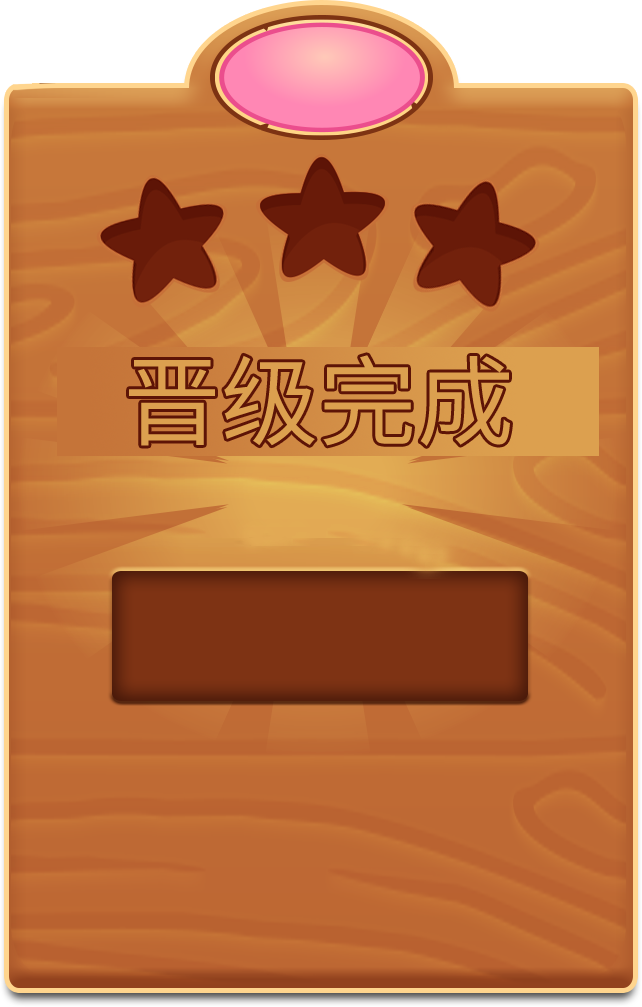
<style>
.page{position:relative;width:642px;height:1007px}
.page>*{position:absolute;margin:0}
.t1{font:97.8px "SourceHanSansCN-Regular";color:#dca04f}
</style>
<div class="page">
<p class="t1" style="left:129px;top:355px;width:381px;height:91px">晋级完成</p>
</div>
